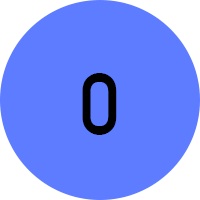
<style>
.page{position:relative;width:200px;height:200px;background:#5d7cff}
.page>*{position:absolute;margin:0}
.t1{font:85px "DINAlternate-Bold";color:#000000}
</style>
<div class="page">
<p class="t1" style="left:82px;top:73px;width:35px;height:62px">0</p>
</div>
